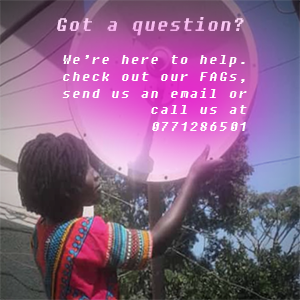
<style>
.page{position:relative;width:300px;height:300px}
.page>*{position:absolute;margin:0}
.t1{font:18px "Fixedsys";letter-spacing:0.075em;color:#f8bdf1;font-style:italic}
.t2{font:14px "Fixedsys";letter-spacing:0.075em;color:#fffeff;font-style:italic}
</style>
<div class="page">
<p class="t1" style="left:57px;top:17px;width:187px;height:19px">Got a question?</p>
<p class="t2" style="left:62px;top:55px;width:185px;height:76px;text-align:right">We’re here to help.<br>check out our FAGs,<br>send us an email or<br>call us at<br>0771286501</p>
</div>
